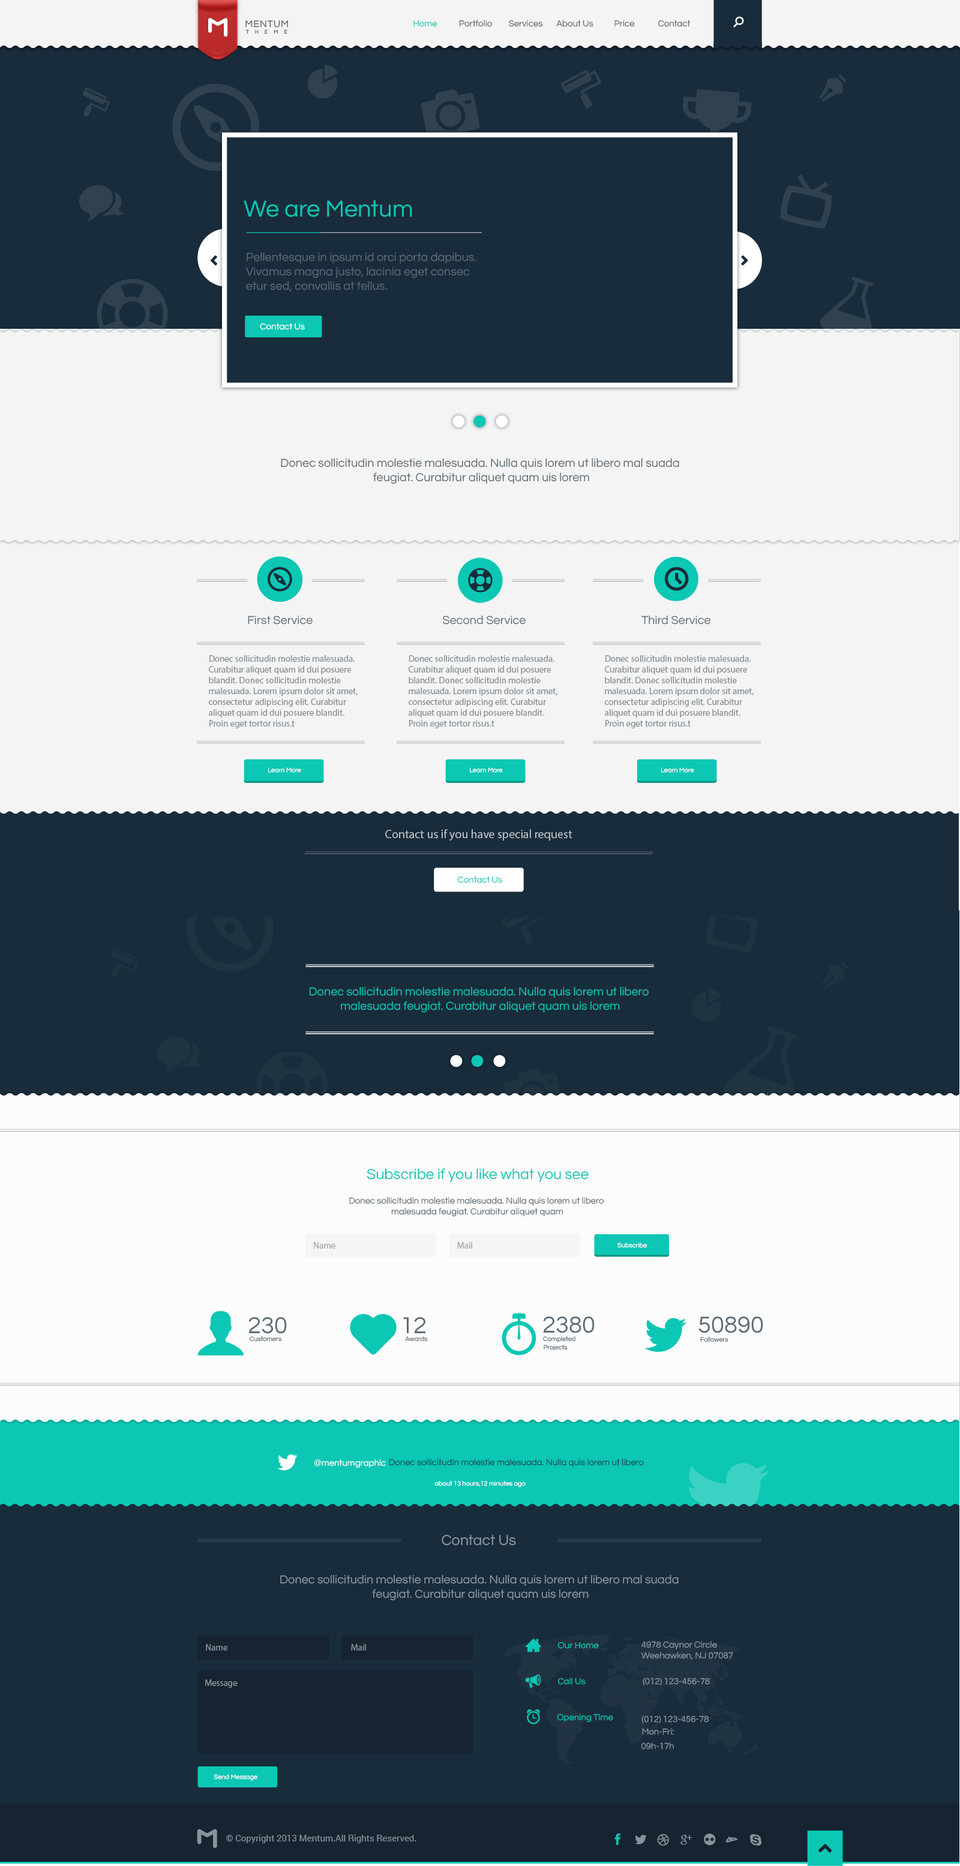
<style>
.page{position:relative;width:960px;height:1866px;background:#192c3b}
.page>*{position:absolute;margin:0}
.t1{font:9.8px "Questrial-Regular";letter-spacing:0.05em;color:#545b6b}
.t2{font:5.4px "Questrial-Regular";letter-spacing:1.1em;color:#545b6b}
.t3{font:9px "Questrial-Regular";color:#0bc7b4}
.t4{font:9px "Questrial-Regular";color:#5b6873}
.t5{font:24px "Questrial-Regular";color:#0bc7b4}
.t6{font:12px "Questrial-Regular";color:#5b6872}
.t7{font:9px "Questrial-Regular";color:#ffffff}
.t8{font:12px "Questrial-Regular";color:#5e6c76}
.t9{font:9px "MyriadPro-Regular";color:#869097}
.t10{font:6.6px "Questrial-Regular";color:#ffffff}
.t11{font:12px "MyriadPro-Regular";color:#babfc4}
.t12{font:12px "Questrial-Regular";color:#0bc7b4}
.t13{font:15px "Questrial-Regular";color:#0bc7b4}
.t14{font:9px "Questrial-Regular";color:#5e6c76}
.t15{font:9px "MyriadPro-Regular";color:#a3a6ae}
.t16{font:24px "Questrial-Regular";color:#5e6c76}
.t17{font:6.6px "Questrial-Regular";color:#5e6c76}
.t18{font:9px "Questrial-Regular";color:#164b53}
.t19{font:15px "Questrial-Regular";color:#8c969d}
.t20{font:12px "Questrial-Regular";color:#8c969d}
.t21{font:9px "MyriadPro-Regular";color:#8b9299}
.t22{font:9px "Questrial-Regular";color:#8c969d}
.t23{font:9px "Roboto-Regular";color:#8b9299}
</style>
<div class="page">
<p class="t1" style="left:245px;top:20px;width:43px;height:8px">MENTUM</p>
<p class="t2" style="left:245px;top:29px;width:42px;height:5px">THEME</p>
<p class="t3" style="left:413px;top:20px;width:24px;height:7px">Home</p>
<p class="t4" style="left:459px;top:20px;width:33px;height:7px">Portfolio</p>
<p class="t4" style="left:508px;top:20px;width:35px;height:7px">Services</p>
<p class="t4" style="left:556px;top:20px;width:37px;height:7px">About Us</p>
<p class="t4" style="left:614px;top:20px;width:21px;height:7px">Price</p>
<p class="t4" style="left:658px;top:20px;width:33px;height:7px">Contact</p>
<p class="t5" style="left:244px;top:200px;width:168px;height:17px">We are Mentum</p>
<p class="t6" style="left:245px;top:252px;width:231px;height:40px">Pellentesque in ipsum id orci porta dapibus. <br>Vivamus magna justo, lacinia eget consec <br>etur sed, convallis at tellus.</p>
<p class="t7" style="left:260px;top:323px;width:45px;height:7px">Contact Us</p>
<p class="t6" style="left:281px;top:458px;width:398px;height:26px;text-align:center">Donec sollicitudin molestie malesuada. Nulla quis lorem ut libero mal suada <br>feugiat. Curabitur aliquet quam uis lorem</p>
<p class="t8" style="left:248px;top:616px;width:65px;height:9px">First Service</p>
<p class="t8" style="left:442px;top:615px;width:84px;height:10px">Second Service</p>
<p class="t8" style="left:641px;top:615px;width:70px;height:10px">Third Service</p>
<p class="t9" style="left:209px;top:655px;width:149px;height:73px">Donec sollicitudin molestie malesuada. <br>Curabitur aliquet quam id dui posuere <br>blandit. Donec sollicitudin molestie <br>malesuada. Lorem ipsum dolor sit amet, <br>consectetur adipiscing elit. Curabitur <br>aliquet quam id dui posuere blandit. <br>Proin eget tortor risus.t</p>
<p class="t9" style="left:409px;top:655px;width:148px;height:73px">Donec sollicitudin molestie malesuada. <br>Curabitur aliquet quam id dui posuere <br>blandit. Donec sollicitudin molestie <br>malesuada. Lorem ipsum dolor sit amet, <br>consectetur adipiscing elit. Curabitur <br>aliquet quam id dui posuere blandit. <br>Proin eget tortor risus.t</p>
<p class="t9" style="left:605px;top:655px;width:149px;height:73px">Donec sollicitudin molestie malesuada. <br>Curabitur aliquet quam id dui posuere <br>blandit. Donec sollicitudin molestie <br>malesuada. Lorem ipsum dolor sit amet, <br>consectetur adipiscing elit. Curabitur <br>aliquet quam id dui posuere blandit. <br>Proin eget tortor risus.t</p>
<p class="t10" style="left:268px;top:767px;width:33px;height:6px">Learn More</p>
<p class="t10" style="left:470px;top:767px;width:33px;height:6px">Learn More</p>
<p class="t10" style="left:661px;top:767px;width:33px;height:6px">Learn More</p>
<p class="t11" style="left:385px;top:829px;width:187px;height:12px">Contact us if you have special request</p>
<p class="t3" style="left:457px;top:876px;width:45px;height:7px">Contact Us</p>
<p class="t12" style="left:309px;top:986px;width:340px;height:27px;text-align:center">Donec sollicitudin molestie malesuada. Nulla quis lorem ut libero <br>malesuada feugiat. Curabitur aliquet quam uis lorem</p>
<p class="t13" style="left:367px;top:1168px;width:222px;height:15px">Subscribe if you like what you see</p>
<p class="t14" style="left:349px;top:1197px;width:255px;height:20px;text-align:center">Donec sollicitudin molestie malesuada. Nulla quis lorem ut libero <br>malesuada feugiat. Curabitur aliquet quam</p>
<p class="t15" style="left:314px;top:1242px;width:21px;height:7px">Name</p>
<p class="t15" style="left:457px;top:1242px;width:15px;height:7px">Mail</p>
<p class="t10" style="left:617px;top:1243px;width:30px;height:5px">Subscribe</p>
<p class="t16" style="left:248px;top:1317px;width:39px;height:17px">230</p>
<p class="t16" style="left:403px;top:1317px;width:22px;height:16px">12</p>
<p class="t16" style="left:543px;top:1316px;width:52px;height:17px">2380</p>
<p class="t16" style="left:698px;top:1316px;width:65px;height:17px">50890</p>
<p class="t17" style="left:250px;top:1336px;width:32px;height:6px">Customers</p>
<p class="t17" style="left:405px;top:1336px;width:23px;height:6px">Awards</p>
<p class="t17" style="left:543px;top:1336px;width:32px;height:7px">Completed</p>
<p class="t17" style="left:700px;top:1337px;width:28px;height:5px">Followers</p>
<p class="t17" style="left:544px;top:1345px;width:24px;height:6px">Projects</p>
<p class="t7" style="left:314px;top:1459px;width:72px;height:9px">@mentumgraphic</p>
<p class="t18" style="left:389px;top:1459px;width:255px;height:9px">Donec sollicitudin molestie malesuada. Nulla quis lorem ut libero</p>
<p class="t10" style="left:434px;top:1481px;width:92px;height:6px">about 13 hours,12 minutes ago</p>
<p class="t19" style="left:442px;top:1534px;width:74px;height:12px">Contact Us</p>
<p class="t20" style="left:280px;top:1574px;width:399px;height:27px;text-align:center">Donec sollicitudin molestie malesuada. Nulla quis lorem ut libero mal suada <br>feugiat. Curabitur aliquet quam uis lorem</p>
<p class="t21" style="left:206px;top:1644px;width:21px;height:7px">Name</p>
<p class="t21" style="left:351px;top:1644px;width:15px;height:7px">Mail</p>
<p class="t3" style="left:557px;top:1642px;width:42px;height:7px">Our Home</p>
<p class="t22" style="left:641px;top:1641px;width:92px;height:19px">4978 Caynor Circle<br>Weehawken, NJ 07087</p>
<p class="t21" style="left:205px;top:1679px;width:33px;height:9px">Message</p>
<p class="t3" style="left:557px;top:1678px;width:29px;height:7px">Call Us</p>
<p class="t22" style="left:643px;top:1678px;width:67px;height:8px">(012) 123-456-78</p>
<p class="t3" style="left:557px;top:1714px;width:56px;height:9px">Opening Time</p>
<p class="t22" style="left:641px;top:1715px;width:68px;height:9px">(012) 123-456-78</p>
<p class="t22" style="left:642px;top:1728px;width:32px;height:7px">Mon-Fri:</p>
<p class="t22" style="left:641px;top:1742px;width:33px;height:8px">09h-17h</p>
<p class="t10" style="left:214px;top:1774px;width:43px;height:7px">Send Message</p>
<p class="t23" style="left:226px;top:1834px;width:190px;height:9px">© Copyright 2013 Mentum.All Rights Reserved.</p>
</div>
